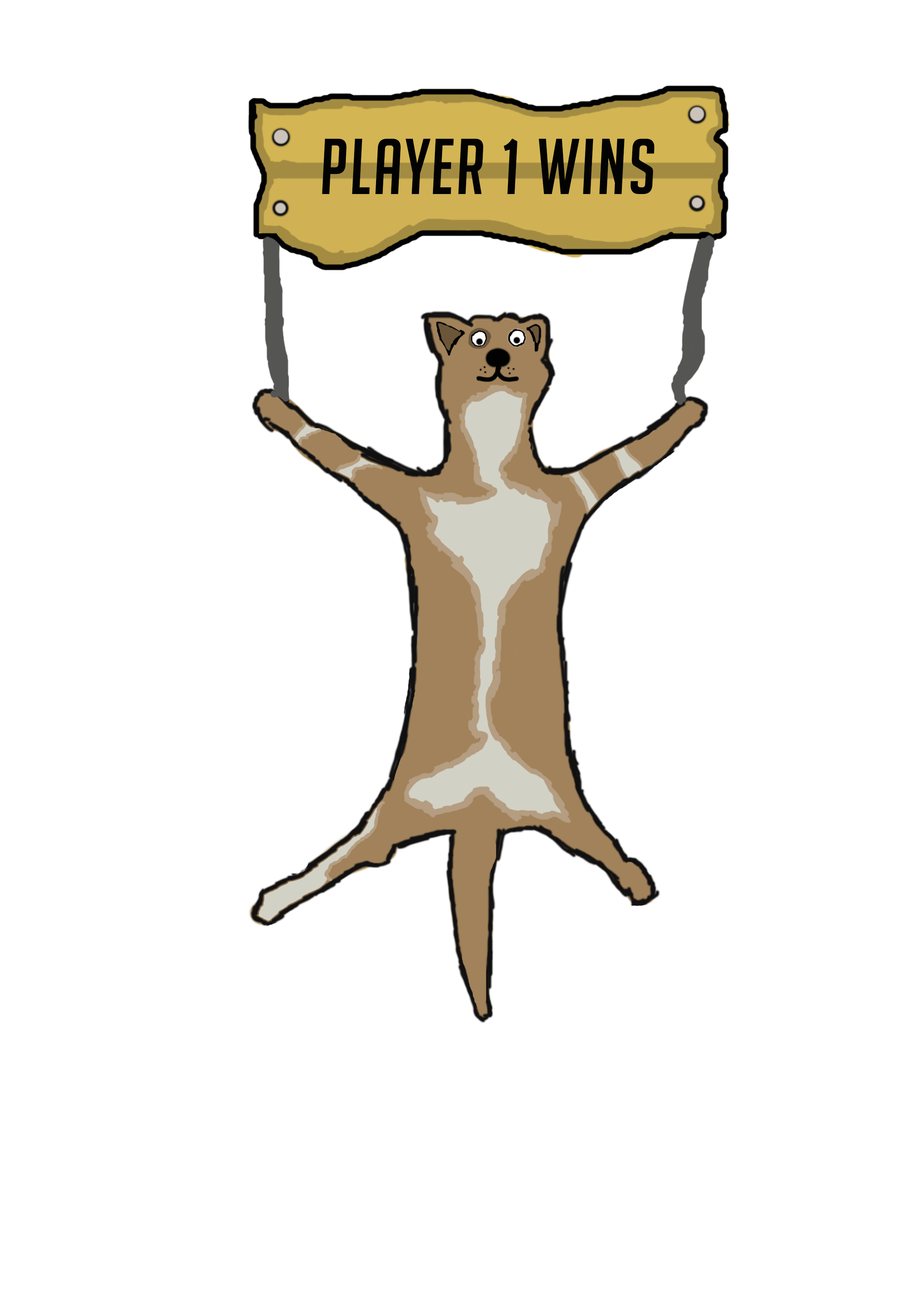
<style>
.page{position:relative;width:918px;height:1299px;background:#ffffff}
.page>*{position:absolute;margin:0}
.t1{font:77.1px "BigNoodleTitling-Oblique";letter-spacing:0.03em;color:#030303}
</style>
<div class="page">
<p class="t1" style="left:322px;top:138px;width:333px;height:56px">Player 1 Wins</p>
</div>
